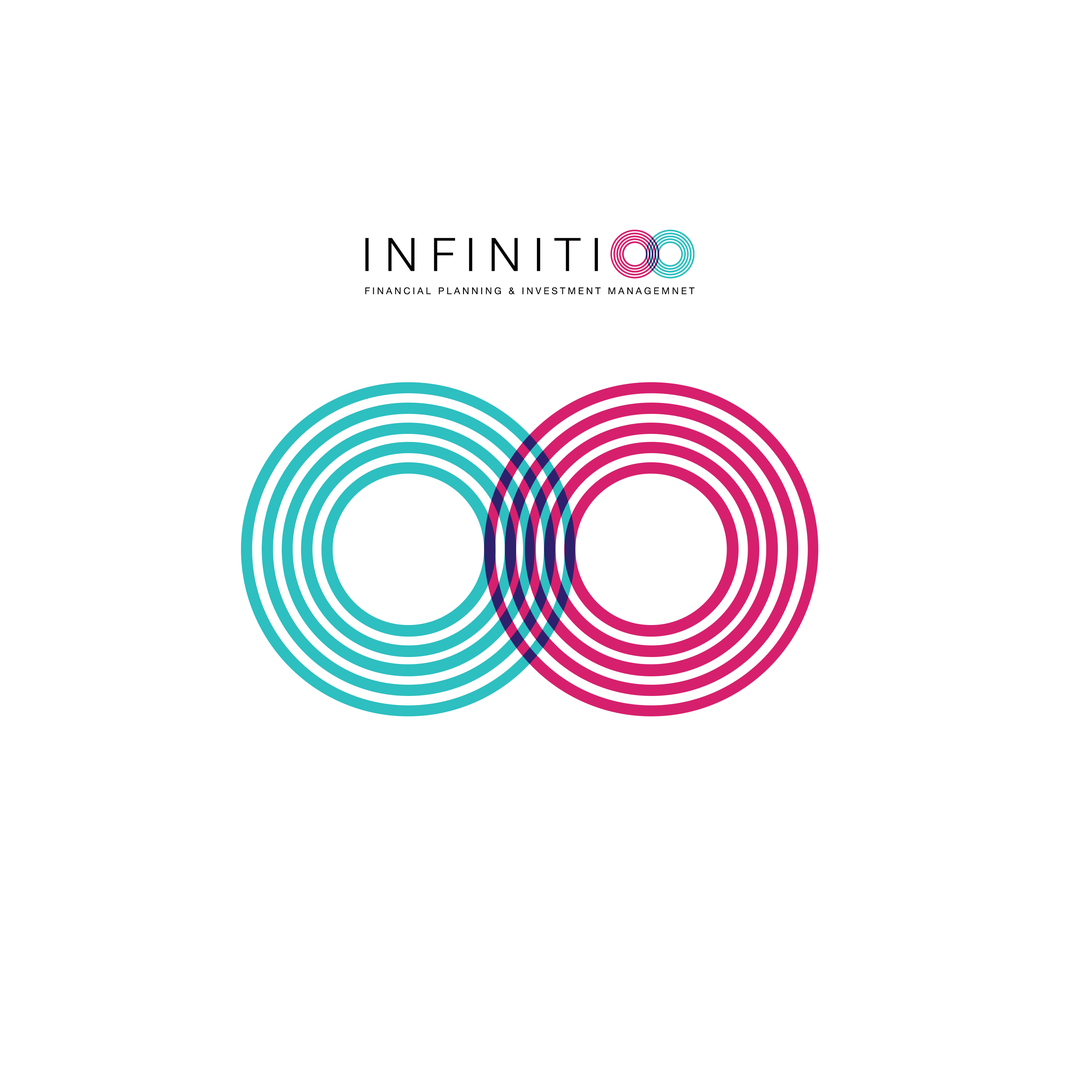
<style>
.page{position:relative;width:1092px;height:1092px;background:#ffffff}
.page>*{position:absolute;margin:0}
.t1{font:46.3px "HelveticaNeue-Light";letter-spacing:0.28em;color:#040203}
.t2{font:46.3px "HelveticaNeue-Light";letter-spacing:0.215em;color:#040203}
.t3{font:46.3px "HelveticaNeue-Light";letter-spacing:0.27em;color:#040203}
.t4{font:46.3px "HelveticaNeue-Light";letter-spacing:0.235em;color:#040203}
.t5{font:46.3px "HelveticaNeue-Light";letter-spacing:0.265em;color:#040203}
.t6{font:9.4px "HelveticaNeue";letter-spacing:0.245em;color:#040203}
</style>
<div class="page">
<p class="t1" style="left:365px;top:238px;width:233px;height:33px">IN<span class="t2">F</span><span class="t3">IN</span><span class="t4">IT</span><span class="t5">I</span></p>
<p class="t6" style="left:365px;top:287px;width:330px;height:7px">FINANCIAL PLANNING &amp; INVESTMENT MANAGEMNET</p>
</div>
